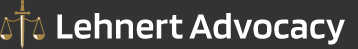
<style>
.page{position:relative;width:358px;height:49px;background:#333333}
.page>*{position:absolute;margin:0}
.t1{font:38px "Blinker-SemiBold";letter-spacing:0.01em;color:#ffffff}
</style>
<div class="page">
<p class="t1" style="left:57px;top:13px;width:288px;height:32px">Lehnert Advocacy</p>
</div>
